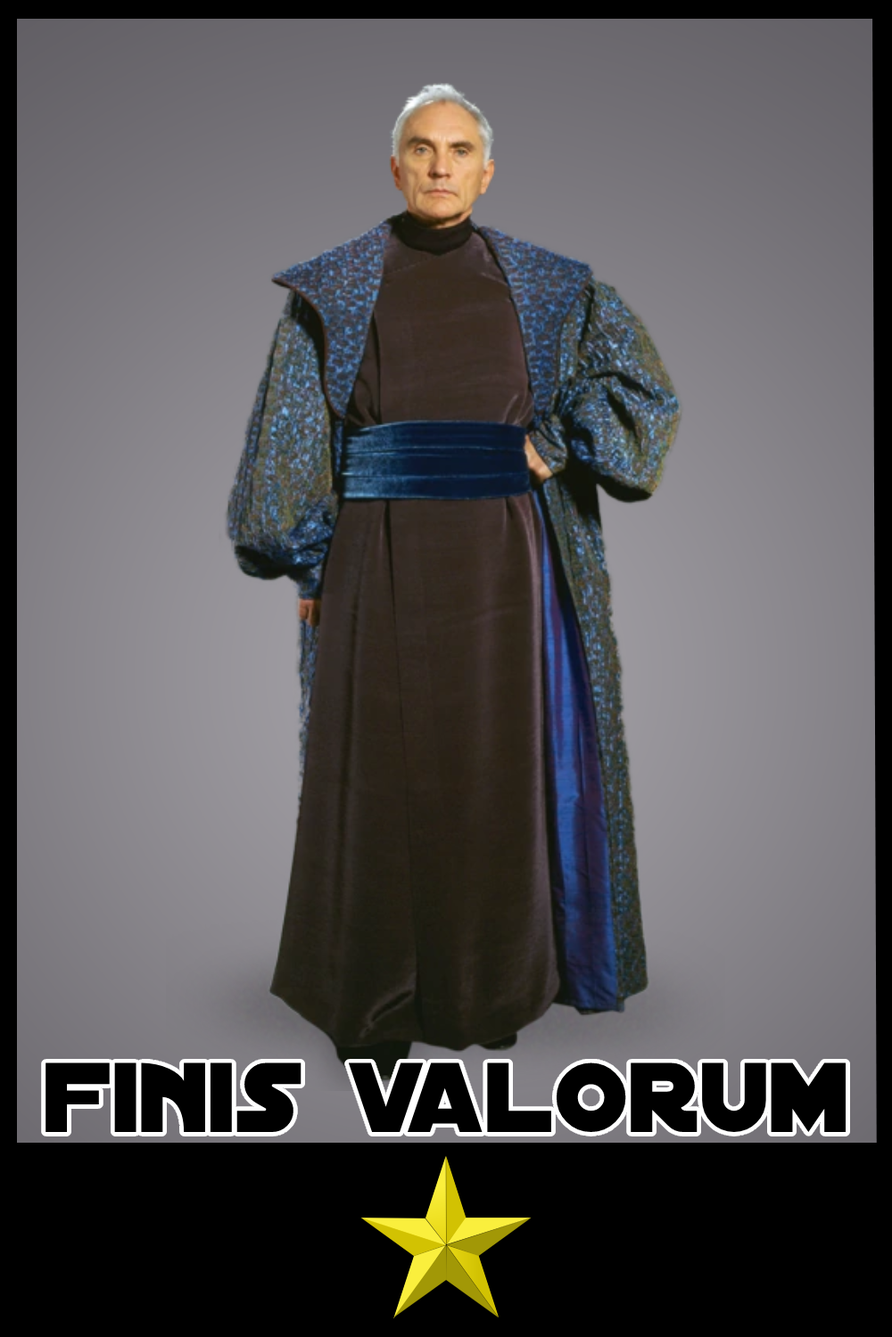
<style>
.page{position:relative;width:892px;height:1337px}
.page>*{position:absolute;margin:0}
.t1{font:106.3px "DistantGalaxy";color:#000000}
</style>
<div class="page">
<p class="t1" style="left:45px;top:1063px;width:801px;height:69px">finis valorum</p>
</div>
